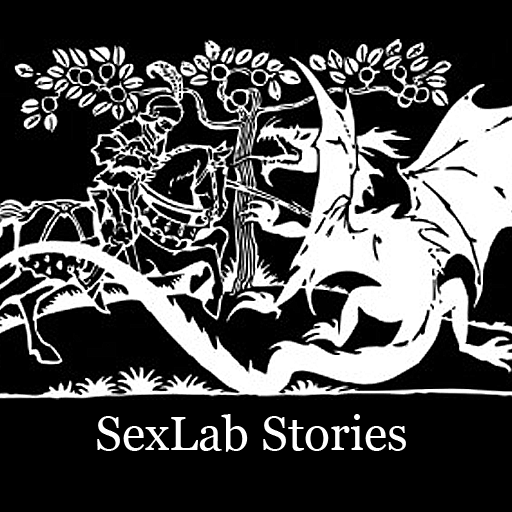
<style>
.page{position:relative;width:512px;height:512px;background:#000000}
.page>*{position:absolute;margin:0}
.t1{font:48px "Georgia";color:#ffffff}
</style>
<div class="page">
<p class="t1" style="left:97px;top:414px;width:309px;height:38px">SexLab Stories</p>
</div>
